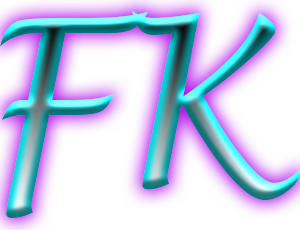
<style>
.page{position:relative;width:300px;height:230px;background:#ffffff}
.page>*{position:absolute;margin:0}
.t1{font:231.5px "LucidaHandwriting-Italic";color:#ffffff}
</style>
<div class="page">
<p class="t1" style="left:0px;top:11px;width:300px;height:207px">FK</p>
</div>
